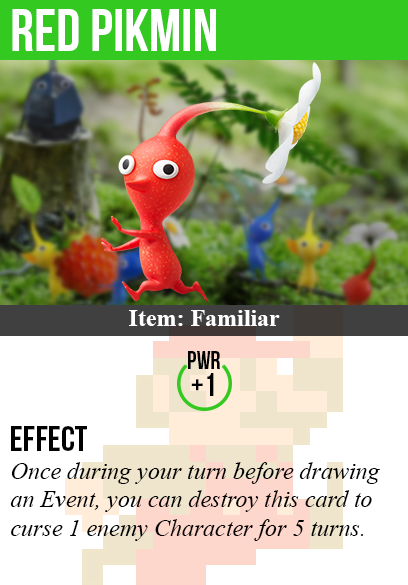
<style>
.page{position:relative;width:408px;height:585px;background:#ffffff}
.page>*{position:absolute;margin:0}
.t1{font:60px "BebasNeue";color:#ffffff}
.t2{font:24px "TimesNewRomanPS-BoldMT";color:#ffffff}
.t3{font:25px "BebasNeue";color:#000000}
.t4{font:32px "BebasNeue";color:#000000}
.t5{font:36px "BebasNeue";color:#000000}
.t6{font:24px "TimesNewRomanPS-ItalicMT";color:#000000}
</style>
<div class="page">
<p class="t1" style="left:12px;top:9px;width:204px;height:42px">red pikmin</p>
<p class="t2" style="left:129px;top:310px;width:151px;height:16px">Item: Familiar</p>
<p class="t3" style="left:188px;top:351px;width:32px;height:18px">pwr</p>
<p class="t4" style="left:191px;top:373px;width:23px;height:23px">+1</p>
<p class="t5" style="left:11px;top:426px;width:76px;height:25px">Effect</p>
<p class="t6" style="left:10px;top:462px;width:370px;height:79px">Once during your turn before drawing<br>an Event, you can destroy this card to<br>curse 1 enemy Character for 5 turns.</p>
</div>
